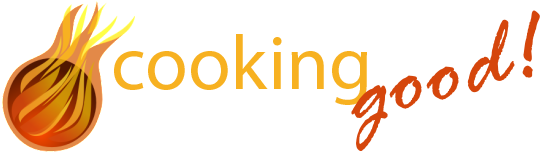
<style>
.page{position:relative;width:541px;height:152px;background:#ffffff}
.page>*{position:absolute;margin:0}
.t1{font:104.5px "RageItalic";color:#d6460c}
.t2{font:77.3px "MyriadPro-Regular";color:#f7b221}
</style>
<div class="page">
<p class="t1" style="left:351px;top:10px;width:189px;height:142px;rotate:-13deg">good!</p>
<p class="t2" style="left:114px;top:34px;width:253px;height:71px">cooking</p>
</div>
